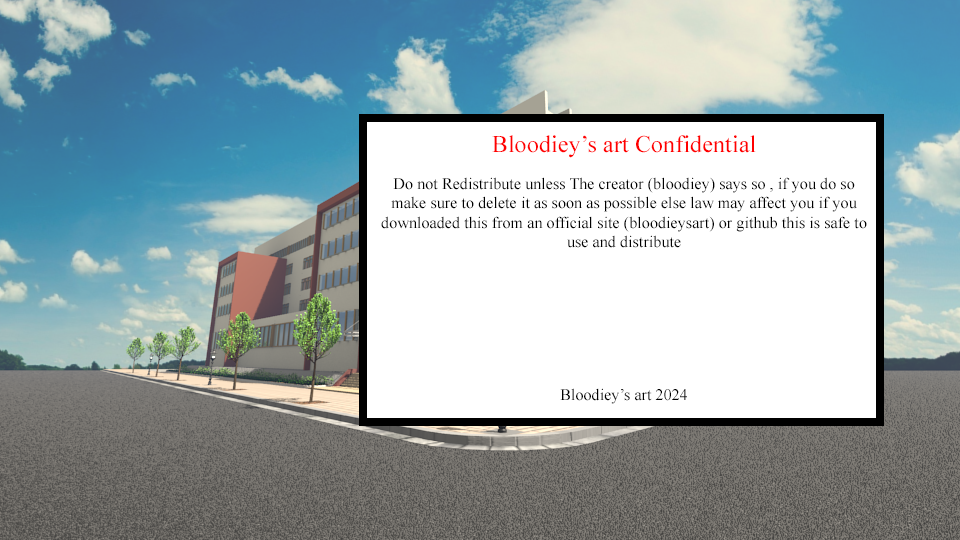
<style>
.page{position:relative;width:960px;height:540px;background:#ffffff}
.page>*{position:absolute;margin:0}
.t1{font:24px "TimesNewRomanPSMT";letter-spacing:0.005em;color:#ff0000}
.t2{font:16px "TimesNewRomanPSMT";letter-spacing:0.005em;color:#000000}
</style>
<div class="page">
<p class="t1" style="left:492px;top:135px;width:264px;height:23px">Bloodiey’s art Confidential</p>
<p class="t2" style="left:381px;top:177px;width:486px;height:227px;text-align:center">Do not Redistribute unless The creator (bloodiey) says so , if you do so make sure to delete it as soon as possible else law may affect you if you downloaded this from an official site (bloodieysart) or github this is safe to use and distribute<br><br><br><br><br><br><br><br>Bloodiey’s art 2024</p>
</div>
